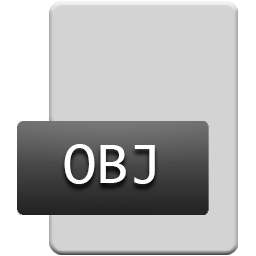
<style>
.page{position:relative;width:256px;height:256px;background:#d3d3d3}
.page>*{position:absolute;margin:0}
.t1{font:60px "Consolas";color:#ffffff}
</style>
<div class="page">
<p class="t1" style="left:64px;top:144px;width:91px;height:40px">OBJ</p>
</div>
